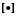
<style>
.page{position:relative;width:16px;height:16px;background:#ffffff}
.page>*{position:absolute;margin:0}
.t1{font:12px "AauxNext-Black";color:#000000}
</style>
<div class="page">
<p class="t1" style="left:2px;top:3px;width:12px;height:10px">[•]</p>
</div>
